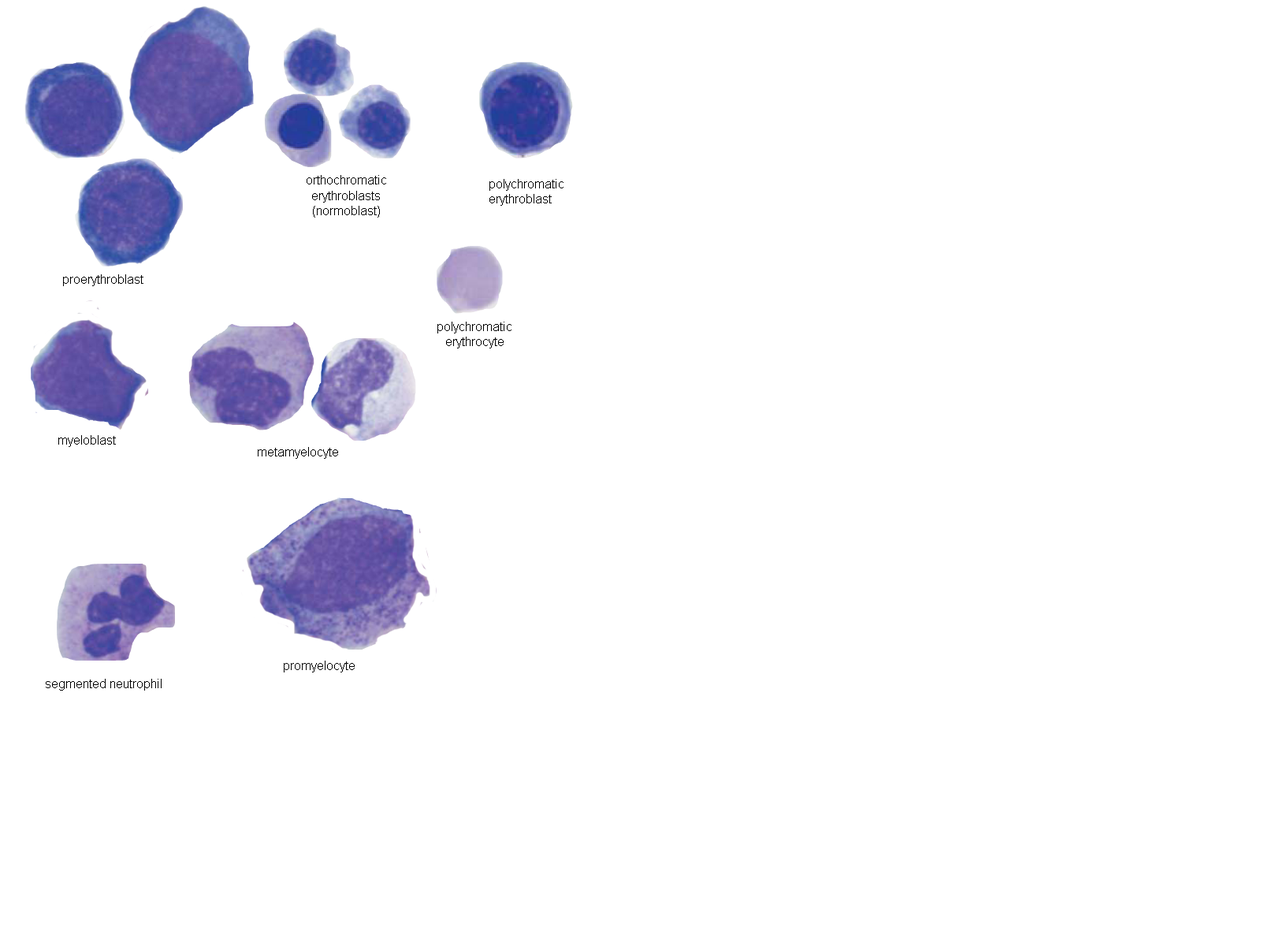
<style>
.page{position:relative;width:1261px;height:946px;background:#ffffff}
.page>*{position:absolute;margin:0}
.t1{font:12.6px "ArialMT";color:#000000}
</style>
<div class="page">
<p class="t1" style="left:307px;top:175px;width:79px;height:43px;text-align:center">orthochromatic<br>erythroblasts<br>(normoblast)</p>
<p class="t1" style="left:489px;top:179px;width:74px;height:27px">polychromatic<br>erythroblast</p>
<p class="t1" style="left:63px;top:274px;width:80px;height:12px">proerythroblast</p>
<p class="t1" style="left:437px;top:322px;width:74px;height:26px;text-align:center">polychromatic<br>erythrocyte</p>
<p class="t1" style="left:58px;top:435px;width:58px;height:12px">myeloblast</p>
<p class="t1" style="left:258px;top:447px;width:80px;height:12px">metamyelocyte</p>
<p class="t1" style="left:284px;top:660px;width:71px;height:12px">promyelocyte</p>
<p class="t1" style="left:46px;top:679px;width:116px;height:11px">segmented neutrophil</p>
</div>
